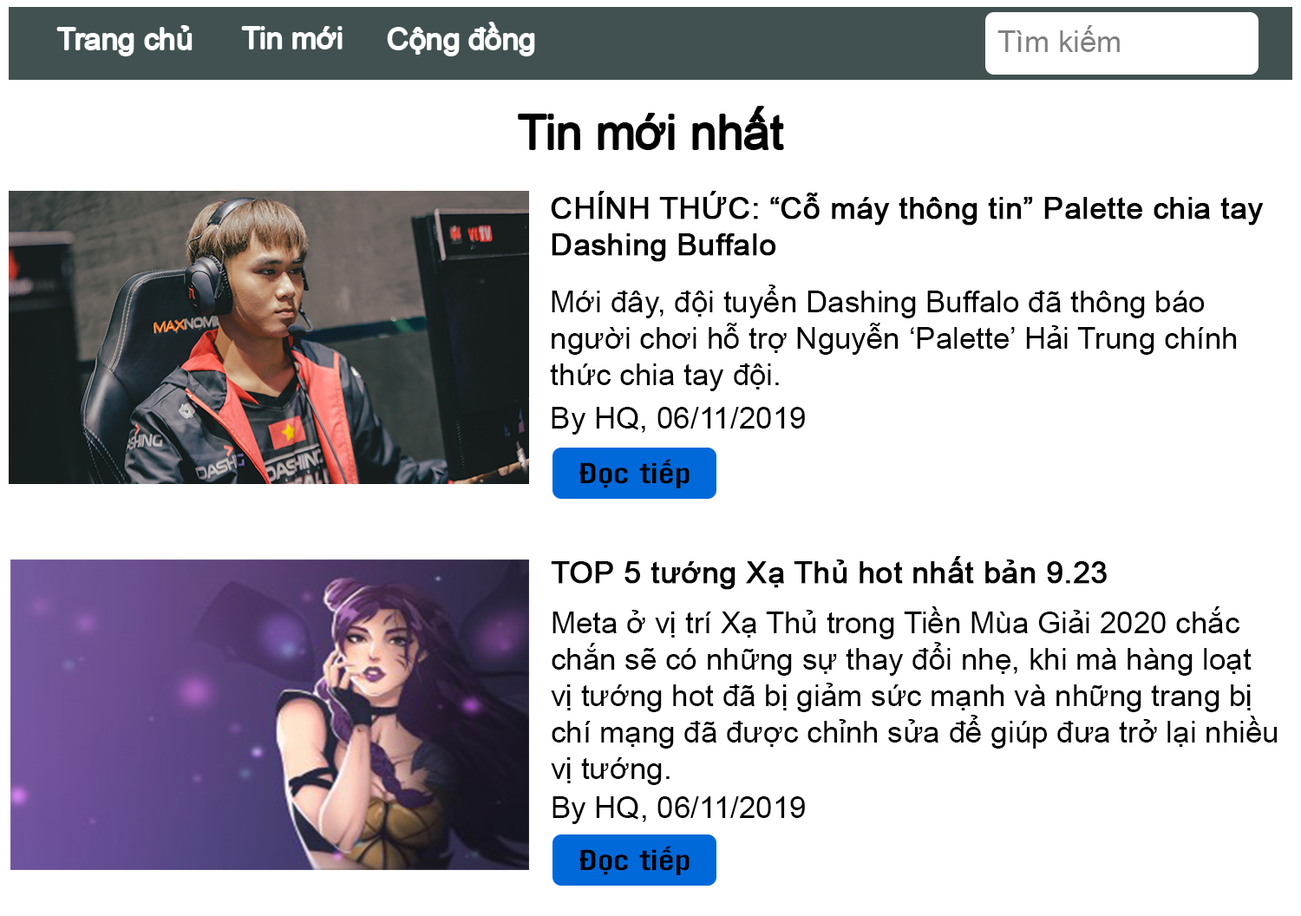
<style>
.page{position:relative;width:1301px;height:916px;background:#ffffff}
.page>*{position:absolute;margin:0}
.t1{font:30.4px "ArialMT";color:#ffffff}
.t2{font:30.4px "ArialMT";color:#808080}
.t3{font:47.7px "ArialMT";color:#000000}
.t4{font:30.4px "ArialMT";color:#000000;font-weight:bold}
.t5{font:30.4px "ArialMT";color:#000000}
.t6{font:30.4px "UTM-Alter-Gothic";color:#000000;scale:1.36 1}
</style>
<div class="page">
<p class="t1" style="left:57px;top:26px;width:135px;height:30px">Trang chủ</p>
<p class="t1" style="left:242px;top:27px;width:100px;height:22px">Tin mới</p>
<p class="t1" style="left:388px;top:23px;width:146px;height:33px">Cộng đồng</p>
<p class="t2" style="left:998px;top:25px;width:122px;height:27px">Tìm kiếm</p>
<p class="t3" style="left:519px;top:107px;width:264px;height:42px">Tin mới nhất</p>
<p class="t4" style="left:551px;top:191px;width:713px;height:71px">CHÍNH THỨC: “Cỗ máy thông tin” Palette chia tay <br>Dashing Buffalo</p>
<p class="t5" style="left:550px;top:285px;width:687px;height:106px">Mới đây, đội tuyển Dashing Buffalo đã thông báo <br>người chơi hỗ trợ Nguyễn ‘Palette’ Hải Trung chính <br>thức chia tay đội.</p>
<p class="t5" style="left:552px;top:407px;width:253px;height:28px">By HQ, 06/11/2019</p>
<p class="t6" style="left:580px;top:459px;width:110px;height:29px">Đọc tiếp</p>
<p class="t4" style="left:551px;top:556px;width:556px;height:34px">TOP 5 tướng Xạ Thủ hot nhất bản 9.23</p>
<p class="t5" style="left:551px;top:606px;width:726px;height:179px">Meta ở vị trí Xạ Thủ trong Tiền Mùa Giải 2020 chắc <br>chắn sẽ có những sự thay đổi nhẹ, khi mà hàng loạt <br>vị tướng hot đã bị giảm sức mạnh và những trang bị <br>chí mạng đã được chỉnh sửa để giúp đưa trở lại nhiều <br>vị tướng.</p>
<p class="t5" style="left:553px;top:796px;width:252px;height:28px">By HQ, 06/11/2019</p>
<p class="t6" style="left:580px;top:846px;width:110px;height:29px">Đọc tiếp</p>
</div>
